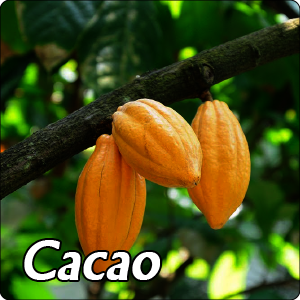
<style>
.page{position:relative;width:300px;height:300px}
.page>*{position:absolute;margin:0}
.t1{font:55.6px "Narkisim";color:#ffffff;font-weight:bold;font-style:italic}
</style>
<div class="page">
<p class="t1" style="left:24px;top:240px;width:136px;height:40px">Cacao</p>
</div>
